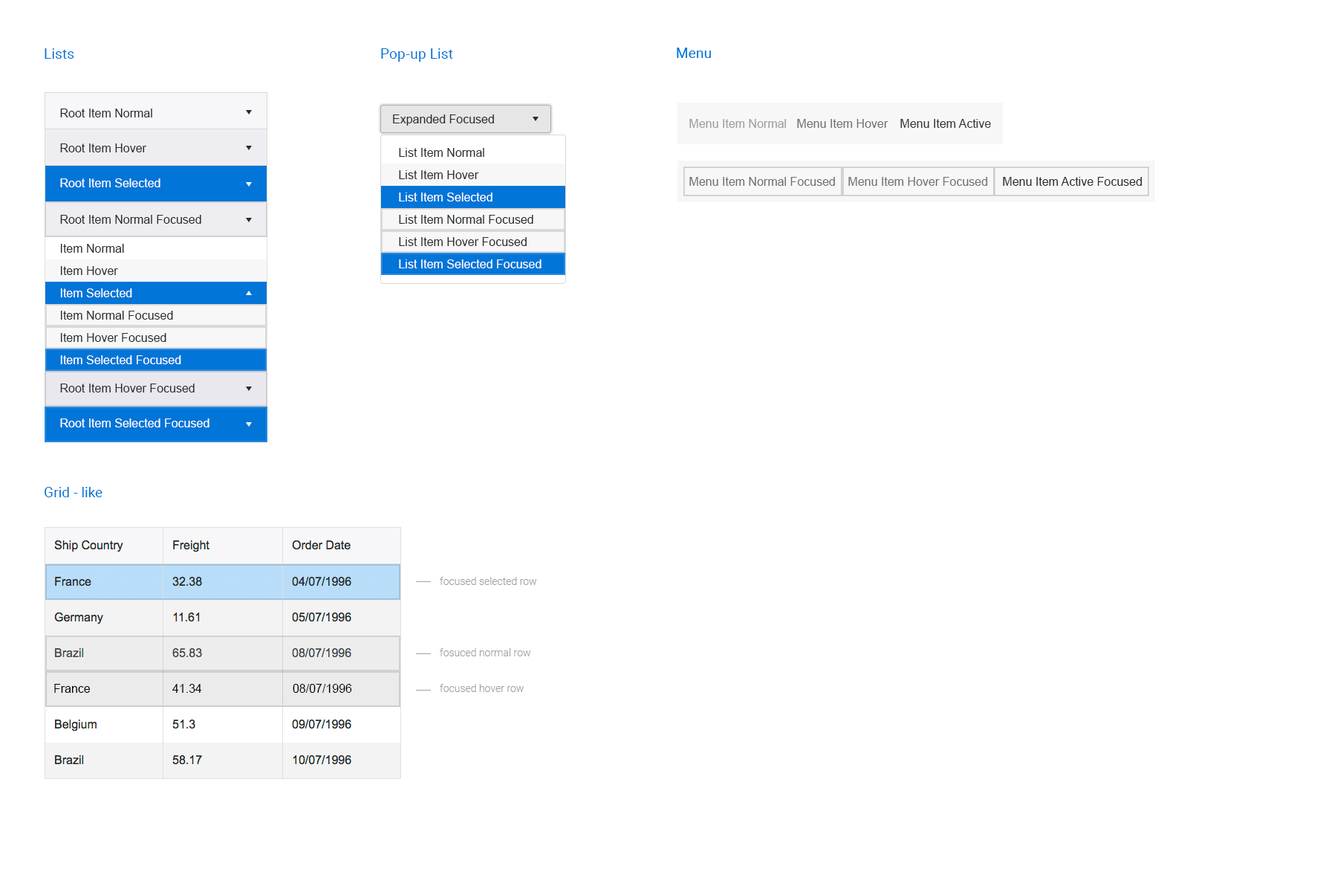
<style>
.page{position:relative;width:1337px;height:892px;background:#ffffff}
.page>*{position:absolute;margin:0}
.t1{font:14.1px "Roboto-Regular";letter-spacing:0.01em;color:#0275d8}
.t2{font:11.9px "ArialMT";color:#292b2c}
.t3{font:11.9px "ArialMT";color:#9d9d9d}
.t4{font:11.9px "ArialMT";color:#707070}
.t5{font:11.9px "ArialMT";color:#323232}
.t6{font:11.9px/22.3px "ArialMT";color:#292b2c}
.t7{font:11.9px/22.3px "ArialMT";color:#ffffff}
.t8{font:11.9px "ArialMT";color:#ffffff}
.t9{font:10.4px/35.7px "Roboto-Light";color:#a1a1a1}
.t10{font:11.9px "ArialMT";color:#000000}
</style>
<div class="page">
<p class="t1" style="left:45px;top:48px;width:29px;height:11px">Lists</p>
<p class="t1" style="left:381px;top:48px;width:72px;height:14px">Pop-up List</p>
<p class="t1" style="left:677px;top:48px;width:34px;height:10px">Menu</p>
<p class="t2" style="left:60px;top:108px;width:92px;height:9px">Root Item Normal</p>
<p class="t2" style="left:393px;top:114px;width:101px;height:12px">Expanded Focused</p>
<p class="t3" style="left:690px;top:119px;width:97px;height:9px">Menu Item Normal</p>
<p class="t4" style="left:797px;top:119px;width:92px;height:9px">Menu Item Hover</p>
<p class="t5" style="left:901px;top:119px;width:90px;height:9px">Menu Item Active</p>
<p class="t2" style="left:60px;top:143px;width:86px;height:9px">Root Item Hover</p>
<p class="t6" style="left:399px;top:148px;width:143px;height:120px">List Item Normal<br>List Item Hover<br><span class="t7">List Item Selected<br></span>List Item Normal Focused<br>List Item Hover Focused<br><span class="t7">List Item Selected Focused<br></span>New Business Plan<br>Sales Forecasts</p>
<p class="t8" style="left:60px;top:178px;width:100px;height:9px">Root Item Selected</p>
<p class="t4" style="left:690px;top:177px;width:145px;height:9px">Menu Item Normal Focused</p>
<p class="t4" style="left:849px;top:177px;width:139px;height:9px">Menu Item Hover Focused</p>
<p class="t2" style="left:1003px;top:177px;width:140px;height:9px">Menu Item Active Focused</p>
<p class="t2" style="left:60px;top:215px;width:141px;height:9px">Root Item Normal Focused</p>
<p class="t7" style="left:60px;top:244px;width:121px;height:120px"><span class="t6">Item Normal<br>Item Hover<br></span>Item Selected<br><span class="t6">Item Normal Focused<br>Item Hover Focused<br></span>Item Selected Focused<br>New Business Plan<br><span class="t6">Sales Forecasts</span></p>
<p class="t2" style="left:60px;top:383px;width:135px;height:9px">Root Item Hover Focused</p>
<p class="t8" style="left:60px;top:418px;width:150px;height:9px">Root Item Selected Focused</p>
<p class="t1" style="left:45px;top:487px;width:58px;height:10px">Grid - like</p>
<p class="t9" style="left:440px;top:577px;width:97px;height:115px">focused selected row<br><br>fosuced normal row<br>focused hover row</p>
<p class="t10" style="left:54px;top:684px;width:37px;height:8px">France</p>
<p class="t10" style="left:172px;top:684px;width:30px;height:8px">41.34</p>
<p class="t10" style="left:293px;top:684px;width:59px;height:8px">08/07/1996</p>
</div>
